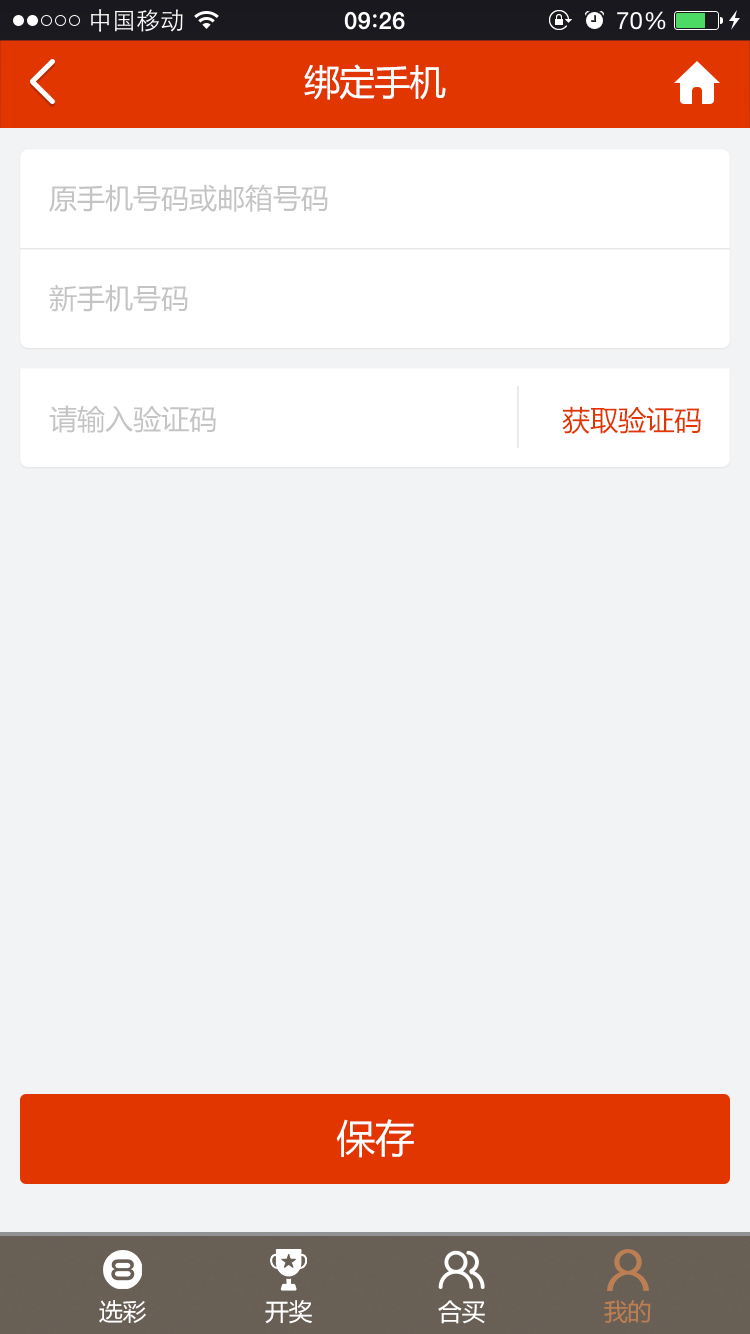
<style>
.page{position:relative;width:750px;height:1334px;background:#f2f3f5}
.page>*{position:absolute;margin:0}
.t1{font:36px "MicrosoftYaHei";letter-spacing:-0.025em;color:#ffffff}
.t2{font:28px "MicrosoftYaHei";color:#c4c4c4}
.t3{font:28px "MicrosoftYaHei";color:#e23600}
.t4{font:39px "MicrosoftYaHei";color:#ffffff}
.t5{font:24px "MicrosoftYaHei";letter-spacing:-0.025em;color:#ffffff}
.t6{font:24px "MicrosoftYaHei";letter-spacing:-0.025em;color:#bc7e53}
</style>
<div class="page">
<p class="t1" style="left:304px;top:64px;width:142px;height:36px">绑定手机</p>
<p class="t2" style="left:49px;top:184px;width:279px;height:28px">原手机号码或邮箱号码</p>
<p class="t2" style="left:49px;top:284px;width:139px;height:28px">新手机号码</p>
<p class="t2" style="left:49px;top:405px;width:167px;height:28px">请输入验证码</p>
<p class="t3" style="left:562px;top:406px;width:139px;height:28px">获取验证码</p>
<p class="t4" style="left:336px;top:1119px;width:78px;height:39px">保存</p>
<p class="t5" style="left:99px;top:1300px;width:47px;height:23px">选彩</p>
<p class="t5" style="left:265px;top:1300px;width:48px;height:24px">开奖</p>
<p class="t5" style="left:438px;top:1300px;width:47px;height:24px">合买</p>
<p class="t6" style="left:604px;top:1300px;width:47px;height:23px">我的</p>
</div>
